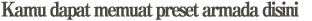
<style>
.page{position:relative;width:312px;height:21px;background:#ffffff}
.page>*{position:absolute;margin:0}
.t1{font:20px "RyuminPro-ExBold";letter-spacing:-0.12em;color:#4c4842;font-weight:bold;scale:0.9 1}
</style>
<div class="page">
<p class="t1" style="left:1px;top:1px;width:298px;height:19px">Kamu dapat memuat preset armada disini</p>
</div>
